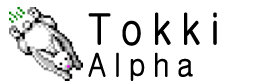
<style>
.page{position:relative;width:256px;height:84px;background:#ffffff}
.page>*{position:absolute;margin:0}
.t1{font:43.3px/41.5px "Wii-kr_RoundGothicB";letter-spacing:0.2em;color:#000000;scale:0.87 1}
.t2{font:32.5px/41.5px "Wii-kr_RoundGothicB";letter-spacing:0.2em;color:#000000;scale:0.87 1}
</style>
<div class="page">
<p class="t1" style="left:88px;top:12px;width:129px;height:69px">Tokki<br><span class="t2">Alpha</span></p>
</div>
